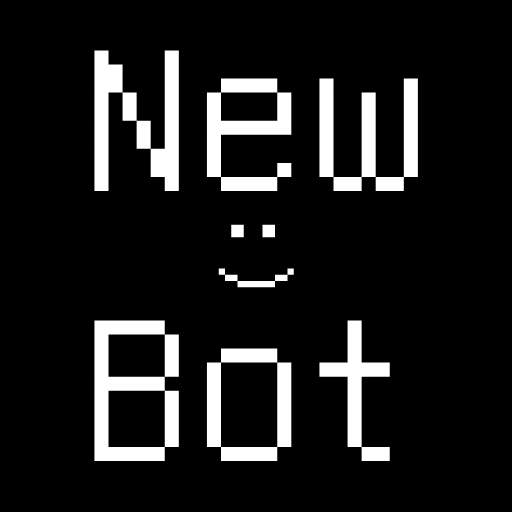
<style>
.page{position:relative;width:512px;height:512px;background:#000000}
.page>*{position:absolute;margin:0}
.t1{font:225px "UnifontMedium";color:#ffffff}
.t2{font:100px "UnifontMedium";color:#ffffff}
</style>
<div class="page">
<p class="t1" style="left:94px;top:50px;width:324px;height:412px;text-align:center">New<br>Bot</p>
<p class="t2" style="left:218px;top:224px;width:76px;height:64px;rotate:90deg">:)</p>
</div>
